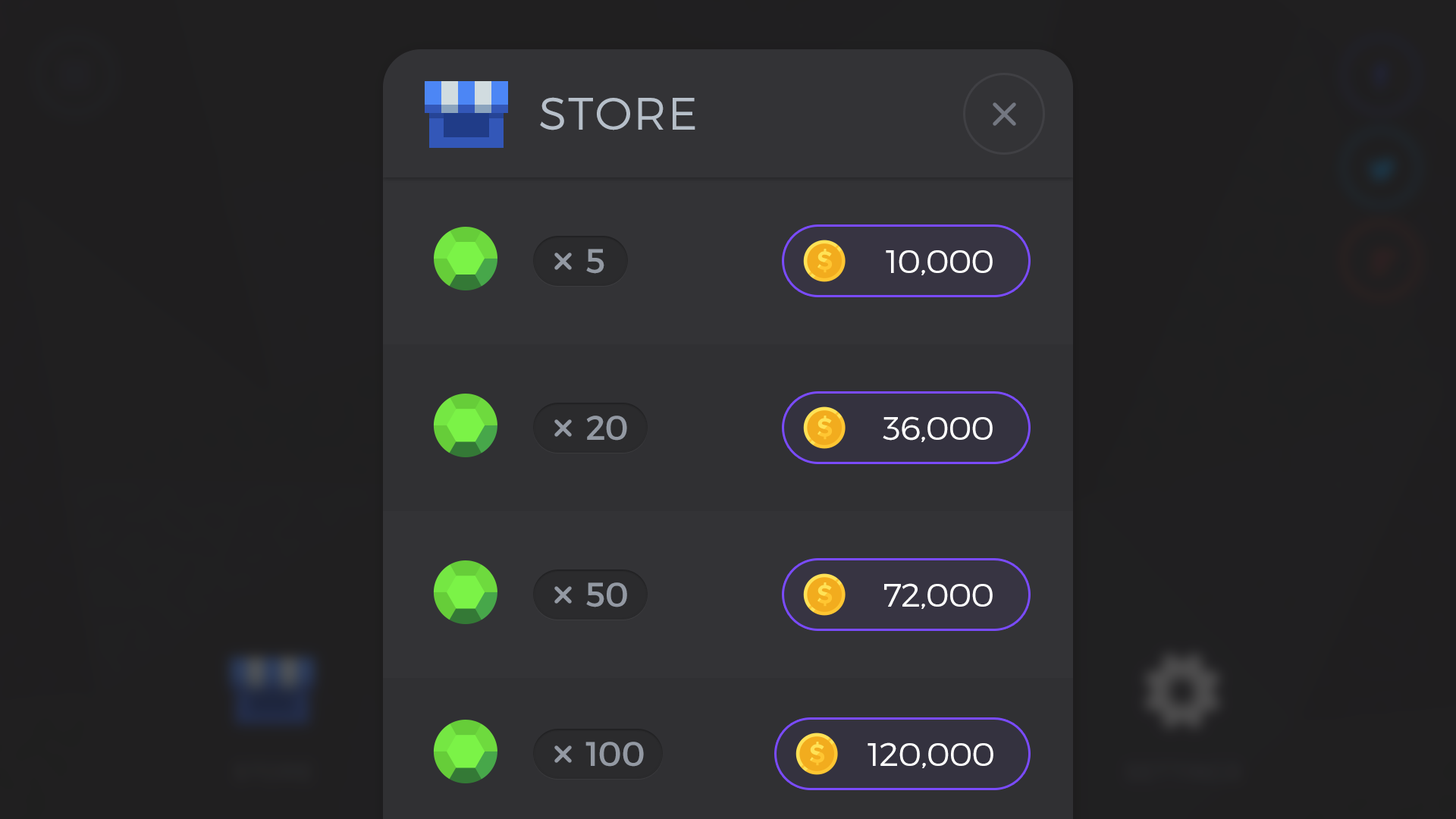
<style>
.page{position:relative;width:1456px;height:819px;background:#333336}
.page>*{position:absolute;margin:0}
.t1{font:45.5px "Montserrat-Light";letter-spacing:0.03em;color:#b6bfc9;text-transform:uppercase}
.t2{font:34.1px "Montserrat-Regular";color:#9399a3}
.t3{font:32.4px "Montserrat-Light";letter-spacing:-0.025em;color:#ffffff;text-transform:uppercase;scale:1.05 1}
</style>
<div class="page">
<p class="t1" style="left:540px;top:97px;width:155px;height:33px">store</p>
<p class="t2" style="left:586px;top:249px;width:18px;height:25px">5</p>
<p class="t3" style="left:886px;top:250px;width:107px;height:25px">10,000</p>
<p class="t2" style="left:586px;top:416px;width:41px;height:25px">20</p>
<p class="t3" style="left:883px;top:416px;width:110px;height:26px">36,000</p>
<p class="t2" style="left:586px;top:582px;width:41px;height:25px">50</p>
<p class="t3" style="left:884px;top:583px;width:109px;height:26px">72,000</p>
<p class="t2" style="left:585px;top:742px;width:59px;height:25px">100</p>
<p class="t3" style="left:868px;top:742px;width:125px;height:26px">120,000</p>
</div>
